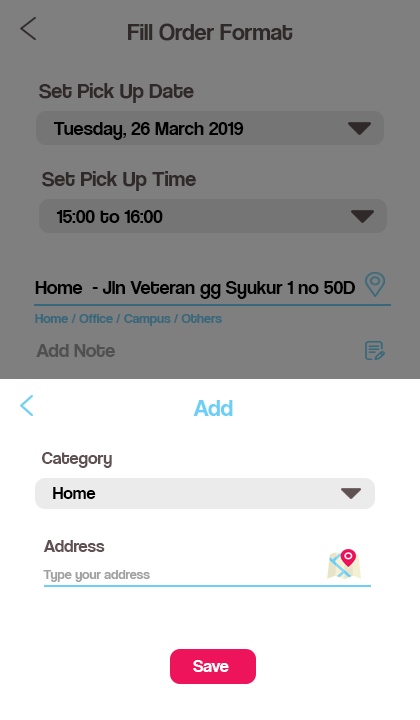
<style>
.page{position:relative;width:420px;height:720px;background:#7f7f7f}
.page>*{position:absolute;margin:0}
.t1{font:24px "CoolveticaRg-Regular";color:#302929}
.t2{font:22px "CoolveticaRg-Regular";color:#302929}
.t3{font:20px "CoolveticaRg-Regular";color:#000000}
.t4{font:14px "CoolveticaRg-Regular";color:#36677b}
.t5{font:20px "CoolveticaRg-Regular";color:#505050}
.t6{font:24px "CoolveticaRg-Regular";color:#6dcff6}
.t7{font:18px "CoolveticaRg-Regular";color:#605252}
.t8{font:18px "CoolveticaRg-Regular";color:#000000}
.t9{font:14px "CoolveticaRg-Regular";color:#a1a1a1}
.t10{font:18px "CoolveticaRg-Regular";color:#ffffff}
</style>
<div class="page">
<p class="t1" style="left:128px;top:23px;width:165px;height:18px">Fill Order Format</p>
<p class="t2" style="left:39px;top:83px;width:155px;height:20px">Set Pick Up Date</p>
<p class="t3" style="left:53px;top:122px;width:191px;height:18px">Tuesday, 26 March 2019</p>
<p class="t2" style="left:42px;top:171px;width:154px;height:20px">Set Pick Up Time</p>
<p class="t3" style="left:56px;top:210px;width:107px;height:13px">15:00 to 16:00</p>
<p class="t3" style="left:35px;top:281px;width:320px;height:18px">Home  - Jln Veteran gg Syukur 1 no 50D</p>
<p class="t4" style="left:35px;top:314px;width:187px;height:12px">Home / Office / Campus / Others</p>
<p class="t5" style="left:36px;top:344px;width:79px;height:13px">Add Note</p>
<p class="t6" style="left:193px;top:400px;width:40px;height:16px">Add</p>
<p class="t7" style="left:42px;top:452px;width:70px;height:16px">Category</p>
<p class="t8" style="left:53px;top:487px;width:43px;height:12px">Home</p>
<p class="t7" style="left:43px;top:540px;width:62px;height:12px">Address</p>
<p class="t9" style="left:43px;top:570px;width:107px;height:12px">Type your address</p>
<p class="t10" style="left:193px;top:660px;width:36px;height:12px">Save</p>
</div>
